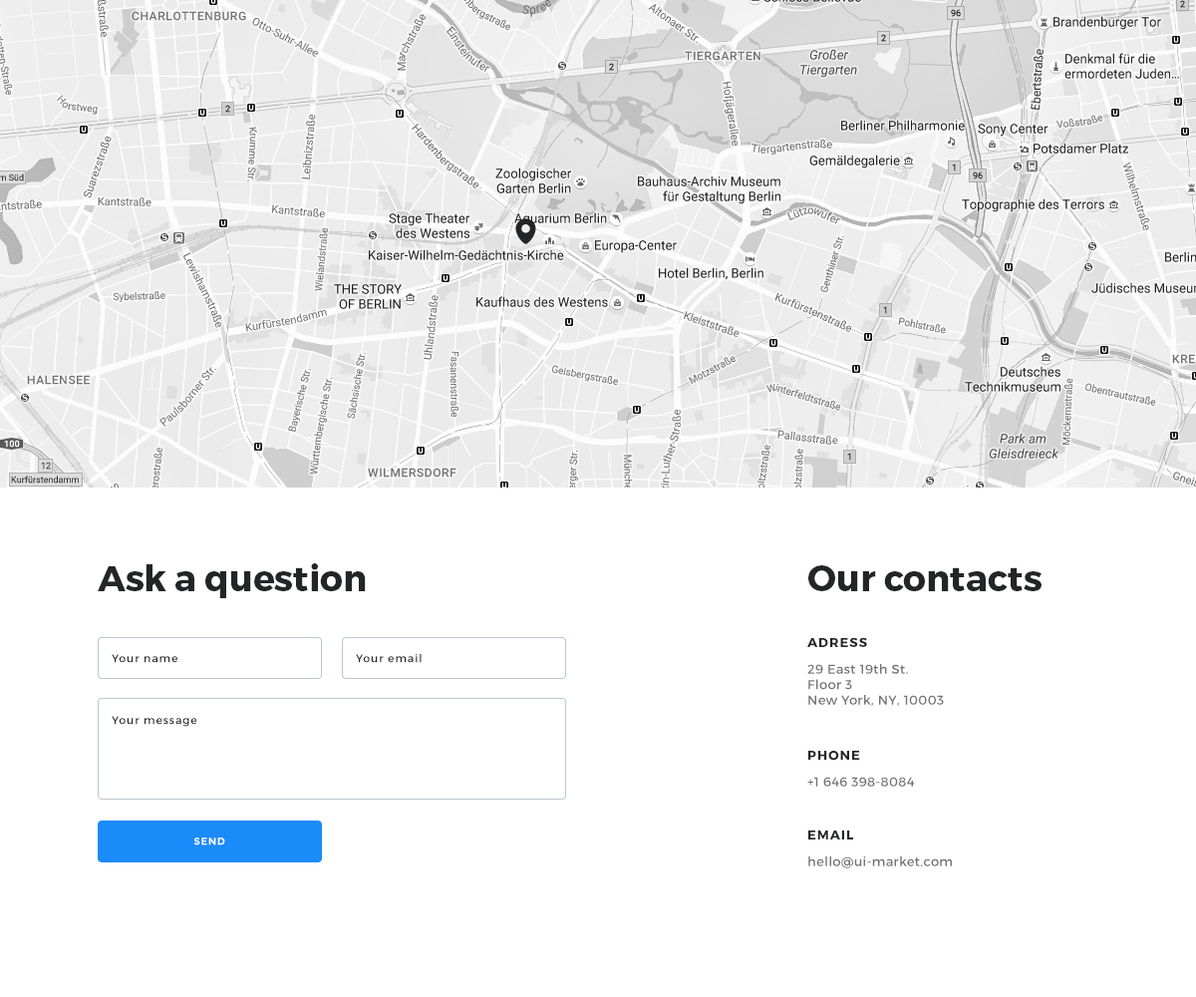
<style>
.page{position:relative;width:1196px;height:997px;background:#ffffff}
.page>*{position:absolute;margin:0}
.t1{font:35.9px "Montserrat-Bold";color:#242526}
.t2{font:13px "Montserrat-Bold";letter-spacing:0.08em;color:#242526;text-transform:uppercase}
.t3{font:11px "Montserrat-Regular";letter-spacing:0.08em;color:#242526}
.t4{font:13px "Montserrat-Regular";letter-spacing:0.025em;color:#747474}
.t5{font:10px "Montserrat-Bold";letter-spacing:0.08em;color:#ffffff;text-transform:uppercase}
</style>
<div class="page">
<p class="t1" style="left:98px;top:563px;width:268px;height:35px">Ask a question</p>
<p class="t1" style="left:808px;top:565px;width:234px;height:26px">Our contacts</p>
<p class="t2" style="left:807px;top:637px;width:60px;height:10px">Adress</p>
<p class="t3" style="left:112px;top:654px;width:65px;height:9px">Your name</p>
<p class="t3" style="left:356px;top:654px;width:66px;height:9px">Your email</p>
<p class="t4" style="left:807px;top:664px;width:137px;height:42px">29 East 19th St. <br>Floor 3 <br>New York, NY, 10003</p>
<p class="t3" style="left:112px;top:716px;width:85px;height:11px">Your message</p>
<p class="t2" style="left:808px;top:751px;width:52px;height:10px">Phone</p>
<p class="t4" style="left:807px;top:777px;width:108px;height:10px">+1 646 398-8084</p>
<p class="t2" style="left:808px;top:830px;width:45px;height:9px">email</p>
<p class="t5" style="left:194px;top:837px;width:31px;height:8px">send</p>
<p class="t4" style="left:808px;top:856px;width:144px;height:12px">hello@ui-market.com</p>
</div>
